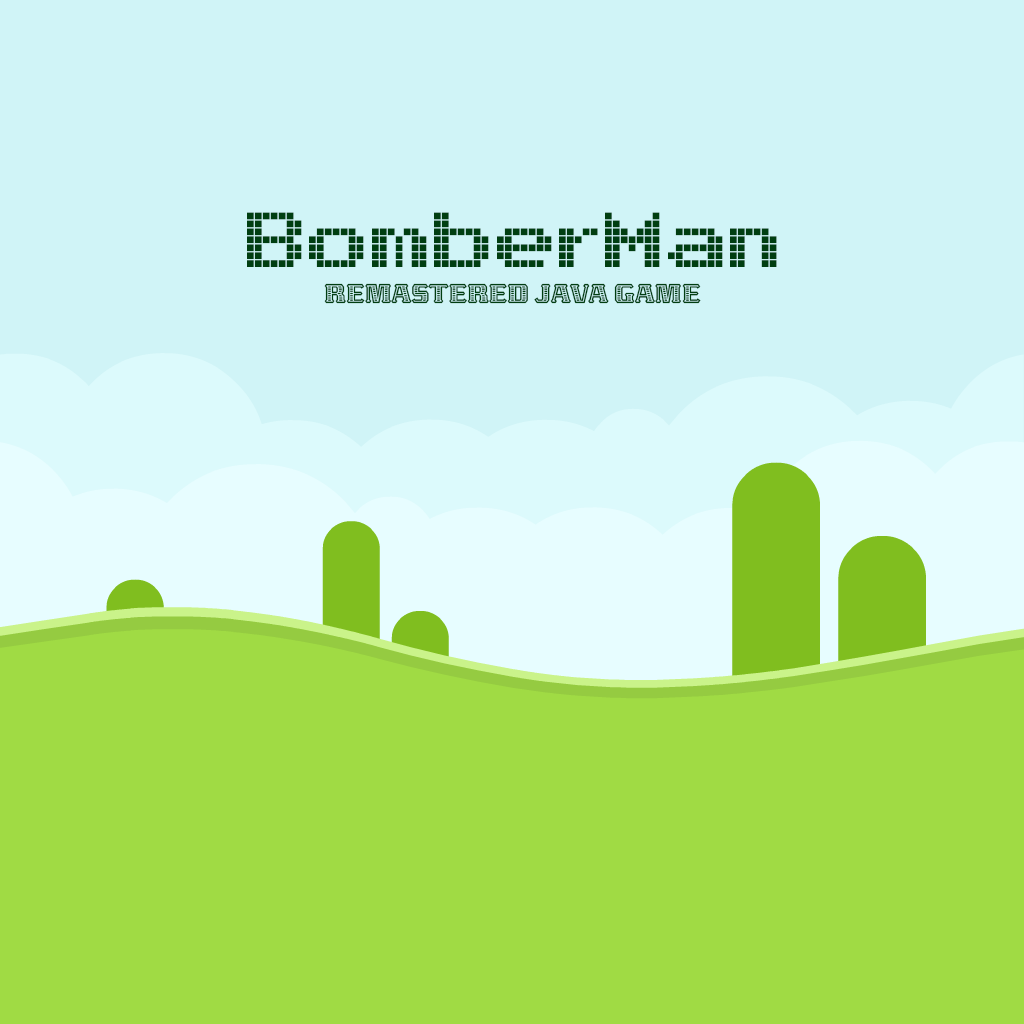
<style>
.page{position:relative;width:1024px;height:1024px;background:#d0f4f7}
.page>*{position:absolute;margin:0}
.t1{font:120px "Arcade";color:#003e11}
.t2{font:30px "AbatonITCTT";color:#003e11}
</style>
<div class="page">
<p class="t1" style="left:247px;top:212px;width:530px;height:55px">BomberMan</p>
<p class="t2" style="left:324px;top:283px;width:377px;height:21px">remastered java game</p>
</div>
